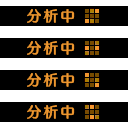
<style>
.page{position:relative;width:128px;height:128px;background:#000000}
.page>*{position:absolute;margin:0}
.t1{font:14.7px "FZFW-QingYinTiS-B--GB1-0";letter-spacing:0.14em;color:#ec962f}
</style>
<div class="page">
<p class="t1" style="left:27px;top:9px;width:48px;height:14px">分析中</p>
<p class="t1" style="left:27px;top:41px;width:48px;height:14px">分析中</p>
<p class="t1" style="left:27px;top:73px;width:48px;height:14px">分析中</p>
<p class="t1" style="left:27px;top:105px;width:48px;height:14px">分析中</p>
</div>
